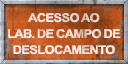
<style>
.page{position:relative;width:128px;height:64px}
.page>*{position:absolute;margin:0}
.t1{font:12px/16px "Arial-BoldMT";letter-spacing:-0.08em;color:#f1e0d6;text-transform:uppercase;scale:1.07 1}
</style>
<div class="page">
<p class="t1" style="left:8px;top:13px;width:113px;height:42px;text-align:center">acesso ao<br>lab. de campo de<br>deslocamento</p>
</div>
